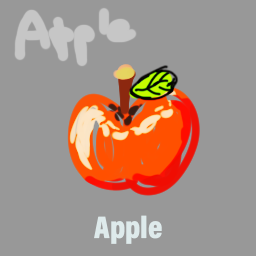
<style>
.page{position:relative;width:256px;height:256px;background:#989898}
.page>*{position:absolute;margin:0}
.t1{font:31.5px "AcuminConcept-CondensedBlack";color:#deeaeb}
</style>
<div class="page">
<p class="t1" style="left:94px;top:215px;width:68px;height:29px">Apple</p>
</div>
